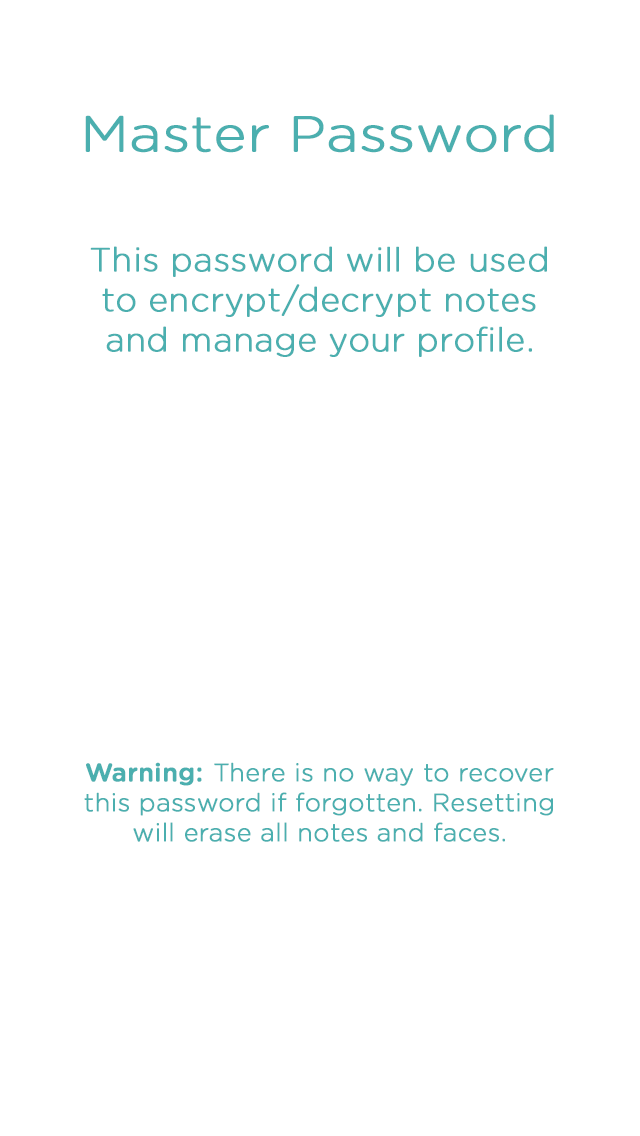
<style>
.page{position:relative;width:640px;height:1136px;background:#ffffff}
.page>*{position:absolute;margin:0}
.t1{font:25px "GothamRounded-Light";color:#4bafaf;font-weight:bold}
.t2{font:50px "GothamRounded-Light";color:#4bafaf;font-weight:bold;scale:1.1 1}
.t3{font:33.3px "GothamRounded-Light";color:#4bafaf;font-weight:bold}
.t4{font:25px "GothamRounded-Medium";color:#4bafaf;font-weight:bold}
</style>
<div class="page">
<p class="t1" style="left:84px;top:114px;width:470px;height:728px;text-align:center"><span class="t2"><br>Master Password<br></span><span class="t3"><br><br>This password will be used to encrypt/decrypt notes and manage your profile.<br><br><br><br><br><br><br><br><br><br><br></span><span class="t4">Warning: </span>There is no way to recover this password if forgotten. Resetting will erase all notes and faces.</p>
</div>
